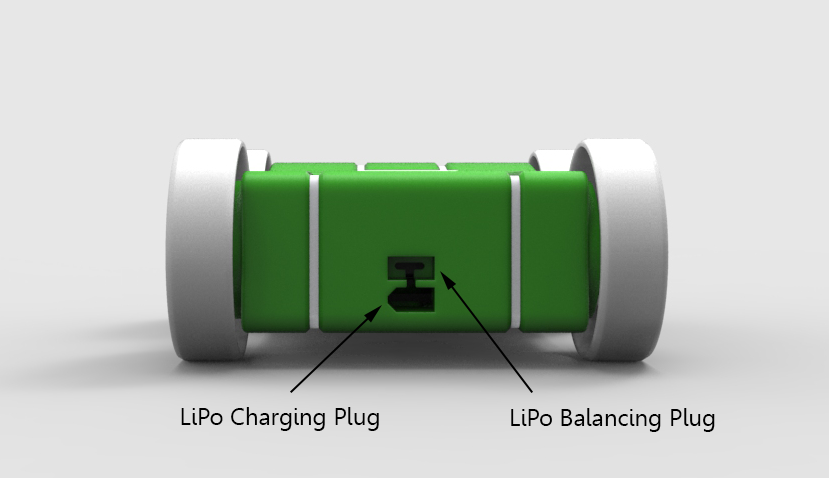
<style>
.page{position:relative;width:829px;height:478px;background:#e7e7e7}
.page>*{position:absolute;margin:0}
.t1{font:24px "Leelawadee";color:#000000}
</style>
<div class="page">
<p class="t1" style="left:181px;top:407px;width:198px;height:24px">LiPo Charging Plug</p>
<p class="t1" style="left:511px;top:408px;width:204px;height:24px">LiPo Balancing Plug</p>
</div>
